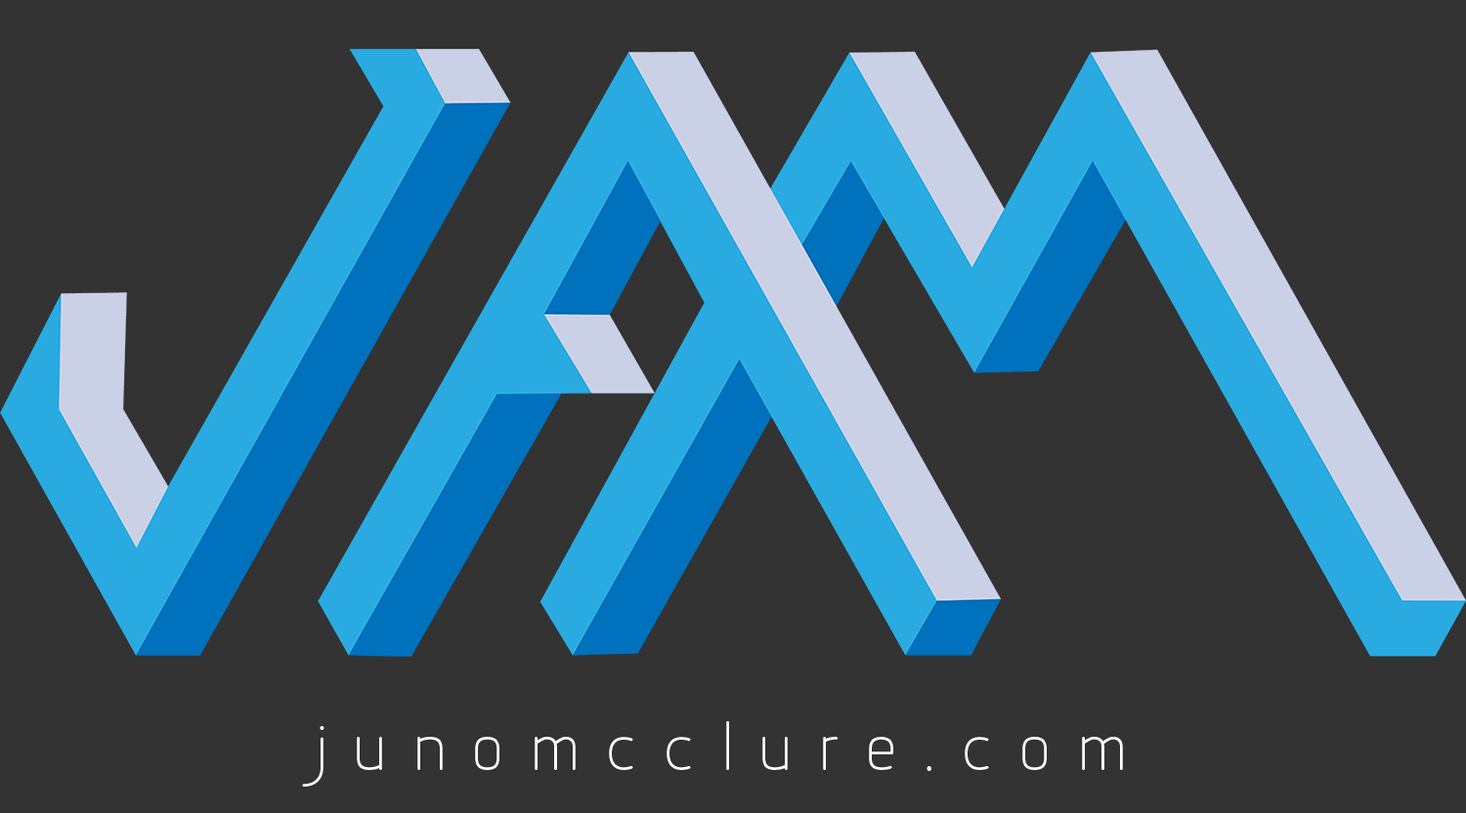
<style>
.page{position:relative;width:1466px;height:813px;background:#333333}
.page>*{position:absolute;margin:0}
.t1{font:73.3px "Designio";letter-spacing:0.34em;color:#ffffff}
</style>
<div class="page">
<p class="t1" style="left:302px;top:721px;width:821px;height:66px">junomcclure.com</p>
</div>
